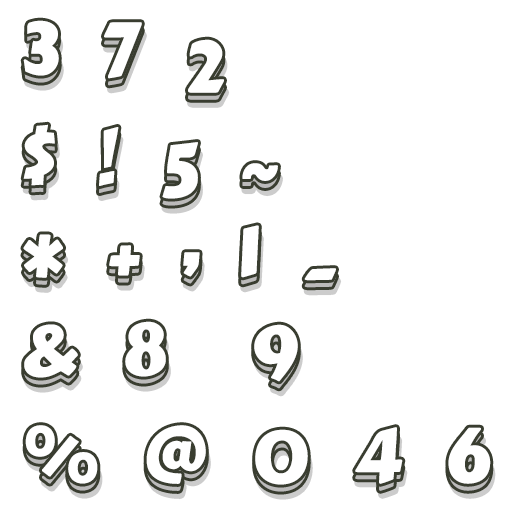
<style>
.page{position:relative;width:512px;height:512px;background:#ffffff}
.page>*{position:absolute;margin:0}
.t1{font:72px "CarterOne";color:#ffffff;font-weight:bold}
.t2{font:72px "CarterOne";font-weight:bold}
</style>
<div class="page">
<p class="t1" style="left:23px;top:20px;width:36px;height:56px">3</p>
<p class="t1" style="left:104px;top:22px;width:38px;height:57px">7</p>
<p class="t1" style="left:188px;top:39px;width:36px;height:54px">2</p>
<p class="t1" style="left:23px;top:124px;width:32px;height:62px">$</p>
<p class="t1" style="left:99px;top:127px;width:20px;height:59px">!</p>
<p class="t1" style="left:162px;top:142px;width:36px;height:57px">5</p>
<p class="t1" style="left:242px;top:163px;width:36px;height:18px">~</p>
<p class="t1" style="left:241px;top:232px;width:18px;height:53px">1</p>
<p class="t1" style="left:241px;top:225px;width:18px;height:53px">1</p>
<p class="t1" style="left:23px;top:234px;width:40px;height:44px">*</p>
<p class="t1" style="left:109px;top:245px;width:31px;height:31px">+</p>
<p class="t1" style="left:183px;top:252px;width:17px;height:25px">,</p>
<p class="t2" style="left:183px;top:259px;width:17px;height:25px">,</p>
<p class="t1" style="left:304px;top:268px;width:32px;height:13px">-</p>
<p class="t1" style="left:24px;top:324px;width:54px;height:54px">&amp;</p>
<p class="t1" style="left:125px;top:321px;width:41px;height:56px">8</p>
<p class="t1" style="left:254px;top:324px;width:44px;height:58px">9</p>
<p class="t1" style="left:25px;top:425px;width:73px;height:59px">%</p>
<p class="t1" style="left:146px;top:425px;width:60px;height:59px">@</p>
<p class="t1" style="left:255px;top:429px;width:53px;height:56px">0</p>
<p class="t1" style="left:355px;top:427px;width:48px;height:57px">4</p>
<p class="t1" style="left:448px;top:427px;width:43px;height:57px">6</p>
</div>
